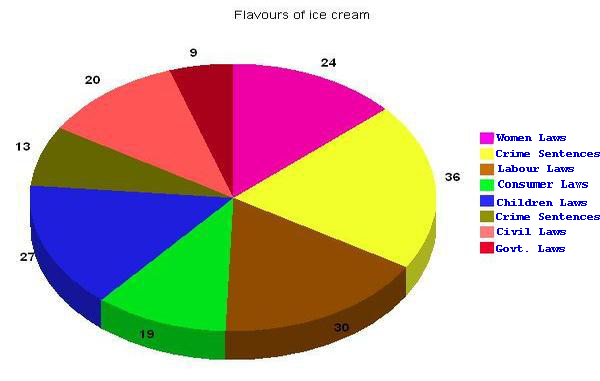
<style>
.page{position:relative;width:600px;height:381px;background:#ffffff}
.page>*{position:absolute;margin:0}
.t1{font:10.7px "CourierNewPS-BoldMT";color:#0000d1}
.t2{font:12.2px "CourierNewPS-BoldMT";color:#0000d1;scale:0.88 1}
</style>
<div class="page">
<p class="t1" style="left:496px;top:134px;width:70px;height:7px">Women Laws</p>
<p class="t1" style="left:496px;top:150px;width:104px;height:7px">Crime Sentences</p>
<p class="t1" style="left:498px;top:165px;width:76px;height:7px">Labour Laws</p>
<p class="t2" style="left:498px;top:180px;width:90px;height:8px">Consumer Laws</p>
<p class="t1" style="left:497px;top:199px;width:90px;height:7px">Children Laws</p>
<p class="t1" style="left:496px;top:213px;width:104px;height:7px">Crime Sentences</p>
<p class="t1" style="left:497px;top:228px;width:69px;height:7px">Civil Laws</p>
<p class="t1" style="left:496px;top:245px;width:69px;height:7px">Govt. Laws</p>
</div>
